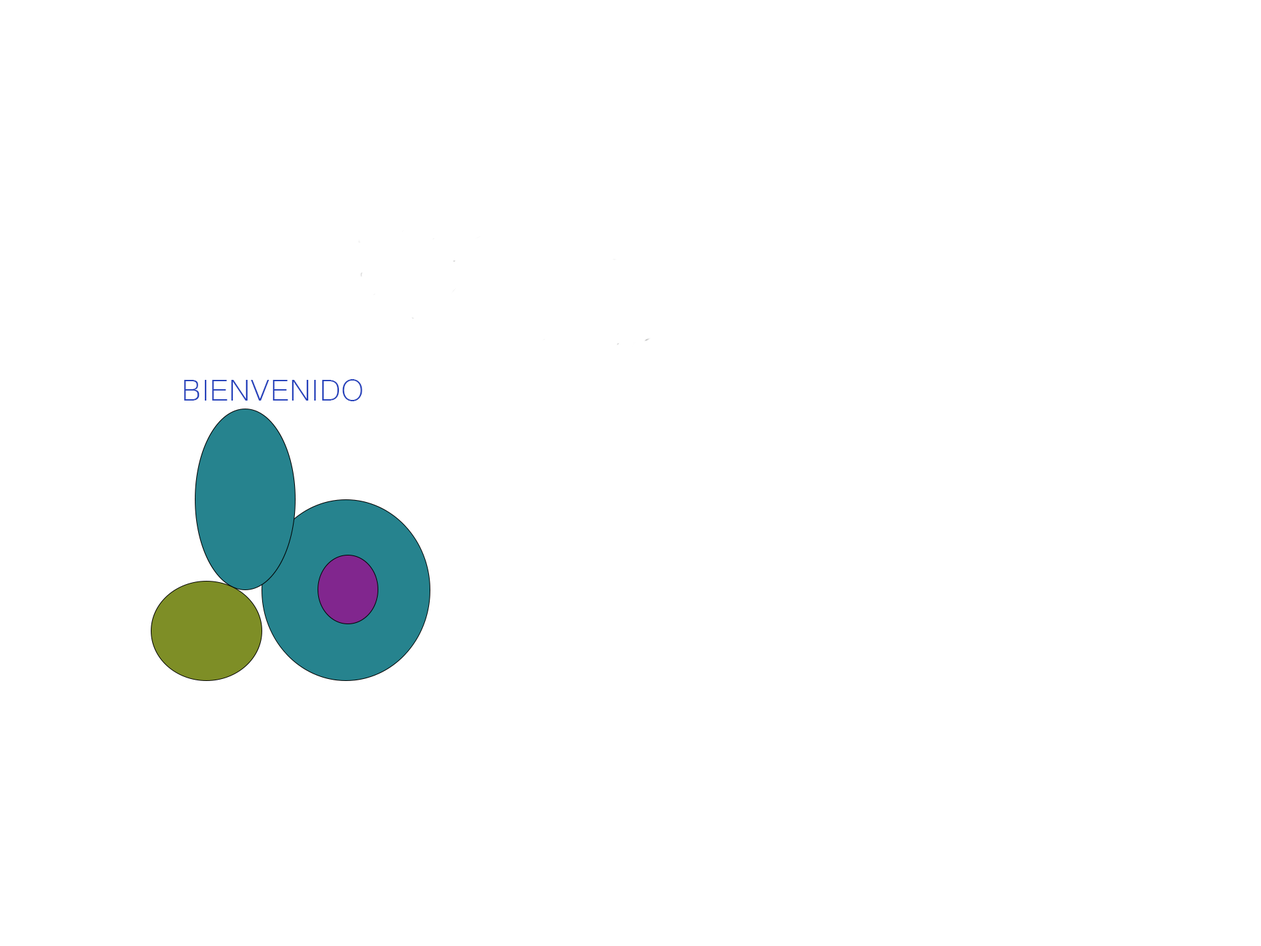
<style>
.page{position:relative;width:1261px;height:946px;background:#ffffff}
.page>*{position:absolute;margin:0}
.t1{font:38.9px "Microsoft-Yi-Baiti";color:#2642bb}
</style>
<div class="page">
<p class="t1" style="left:184px;top:379px;width:178px;height:22px">BIENVENIDO</p>
</div>
